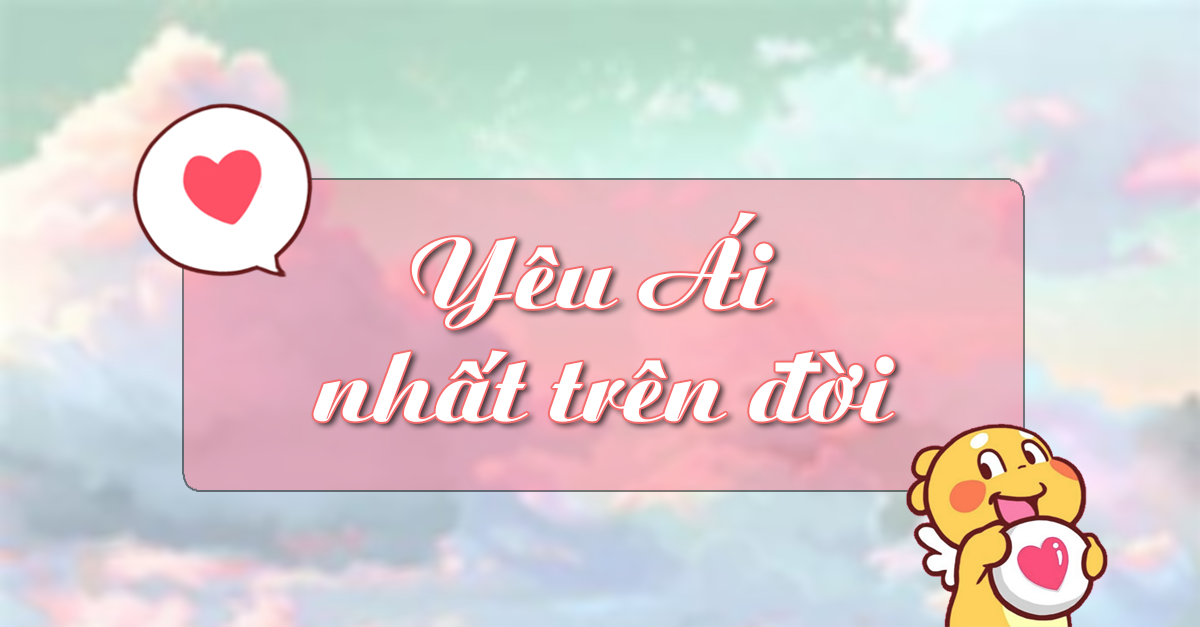
<style>
.page{position:relative;width:1200px;height:627px}
.page>*{position:absolute;margin:0}
.t1{font:104.5px "Aristonne";color:#ffffff}
</style>
<div class="page">
<p class="t1" style="left:313px;top:212px;width:581px;height:210px;text-align:center">Yêu Ái <br>nhất trên đời</p>
</div>
